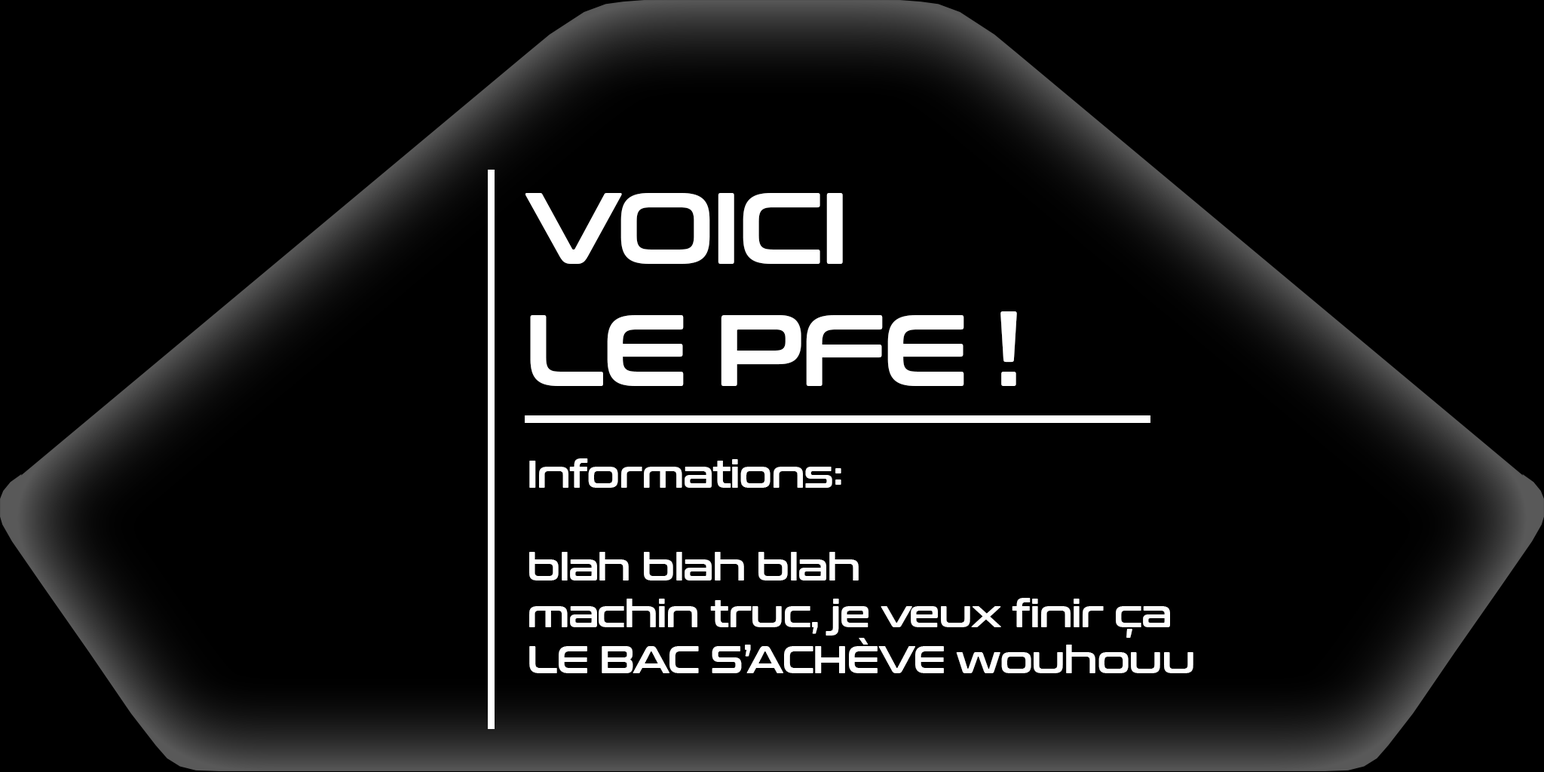
<style>
.page{position:relative;width:1544px;height:772px;background:#000000}
.page>*{position:absolute;margin:0}
.t1{font:101.6px "ConthraxSb-Regular";letter-spacing:-0.035em;color:#ffffff}
.t2{font:38.7px "ConthraxSb-Regular";letter-spacing:-0.035em;color:#ffffff}
</style>
<div class="page">
<p class="t1" style="left:525px;top:193px;width:492px;height:193px">VOICI<br>LE PFE !</p>
<p class="t2" style="left:529px;top:458px;width:665px;height:215px">Informations:<br><br>blah blah blah<br>machin truc, je veux finir ça<br>LE BAC S’ACHÈVE wouhouu</p>
</div>
